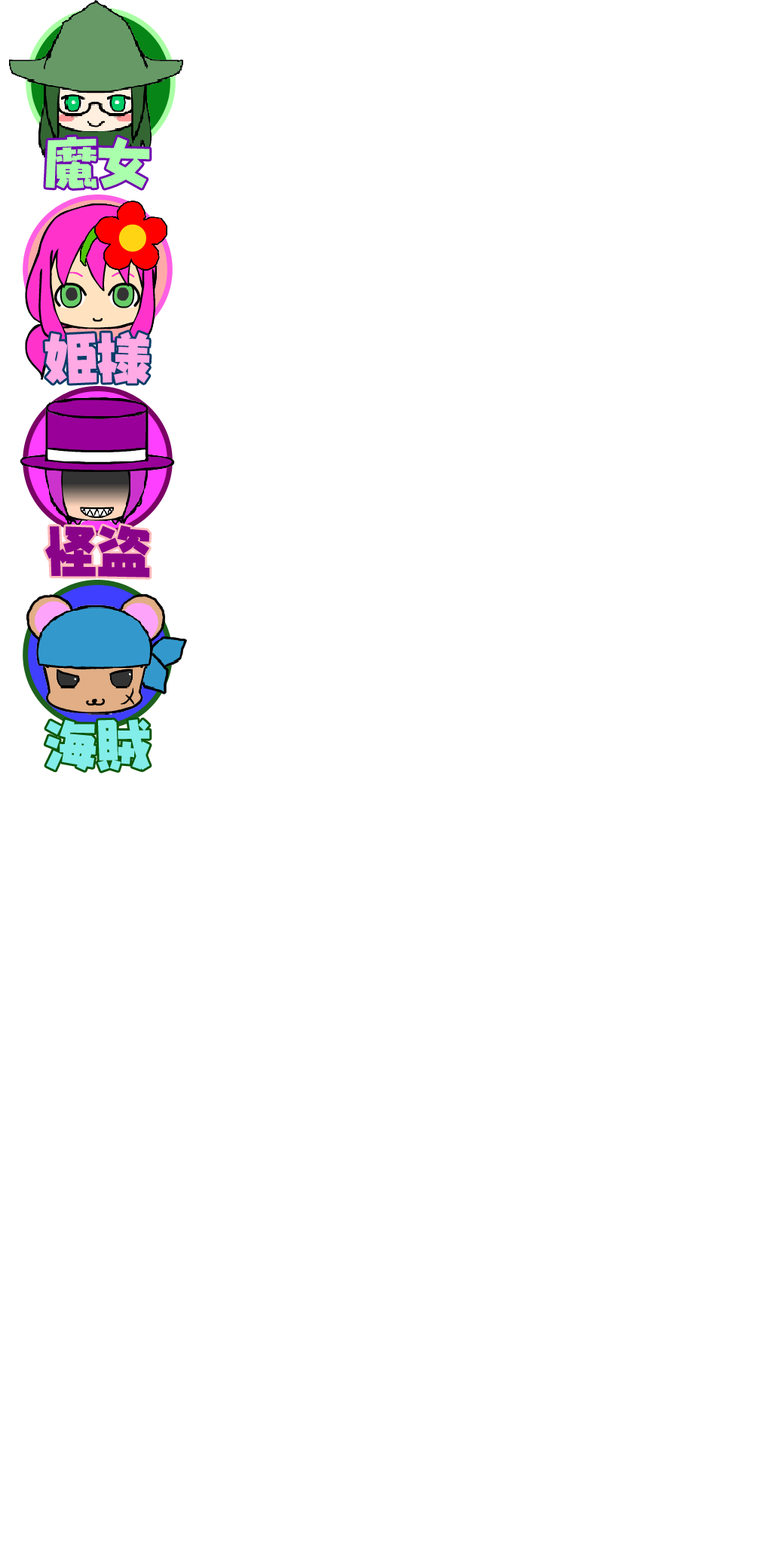
<style>
.page{position:relative;width:772px;height:1544px;background:#ffffff}
.page>*{position:absolute;margin:0}
.t1{font:52.8px "NIS-JYA-U-83pv-RKSJ-H";color:#aaffac}
.t2{font:52.8px "NIS-JYA-U-83pv-RKSJ-H";color:#ffaae4}
.t3{font:52.8px "NIS-JYA-U-83pv-RKSJ-H";color:#890389}
.t4{font:52.8px "NIS-JYA-U-83pv-RKSJ-H";color:#83ede9}
</style>
<div class="page">
<p class="t1" style="left:45px;top:136px;width:105px;height:53px">魔女</p>
<p class="t2" style="left:44px;top:332px;width:106px;height:52px">姫様</p>
<p class="t3" style="left:45px;top:525px;width:105px;height:53px">怪盗</p>
<p class="t4" style="left:45px;top:719px;width:105px;height:52px">海賊</p>
</div>
